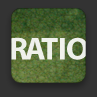
<style>
.page{position:relative;width:97px;height:97px;background:#333333}
.page>*{position:absolute;margin:0}
.t1{font:32px "Myriad-Bold";color:#ffffff}
</style>
<div class="page">
<p class="t1" style="left:11px;top:37px;width:77px;height:23px;opacity:0.9">RATIO</p>
</div>
